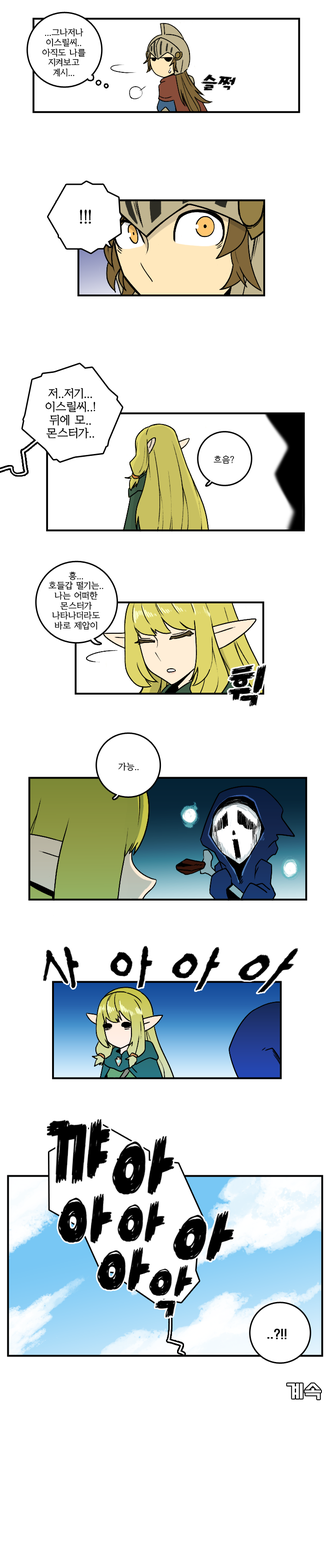
<style>
.page{position:relative;width:332px;height:1568px;background:#ffffff}
.page>*{position:absolute;margin:0}
.t1{font:8.3px "KoreanYMJ-B";color:#000000}
.t2{font:16.6px "KoreanYMJ-B";color:#000000}
.t3{font:11.1px "KoreanYMJ-B";color:#000000}
.t4{font:11.1px "TTComsetakR";color:#000000}
.t5{font:16.9px "TTComsetakR";color:#ffffff;scale:1.18 1}
</style>
<div class="page">
<p class="t1" style="left:42px;top:28px;width:44px;height:49px;text-align:center">...그나저나<br>이스릴씨..<br>아직도 나를<br>지켜보고<br>계시...</p>
<p class="t2" style="left:80px;top:209px;width:11px;height:15px">!!!</p>
<p class="t3" style="left:46px;top:388px;width:49px;height:51px;text-align:center">저..저기...<br>이스릴씨..!<br>뒤에 모..<br>몬스터가..</p>
<p class="t1" style="left:213px;top:455px;width:21px;height:9px">흐음?</p>
<p class="t1" style="left:48px;top:572px;width:55px;height:58px;text-align:center">흥...<br>호들갑 떨기는..<br>나는 어떠한<br>몬스터가<br>나타나더라도<br>바로 제압이</p>
<p class="t1" style="left:118px;top:762px;width:21px;height:9px">가능..</p>
<p class="t4" style="left:267px;top:1328px;width:19px;height:11px">..?!!</p>
<p class="t5" style="left:287px;top:1383px;width:34px;height:16px">계속</p>
</div>
